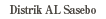
<style>
.page{position:relative;width:106px;height:19px;background:#ffffff}
.page>*{position:absolute;margin:0}
.t1{font:12px "RyuminPro-ExBold";letter-spacing:-0.04em;color:#4c4843;scale:0.9 1}
</style>
<div class="page">
<p class="t1" style="left:9px;top:4px;width:87px;height:11px">Distrik AL Sasebo</p>
</div>
